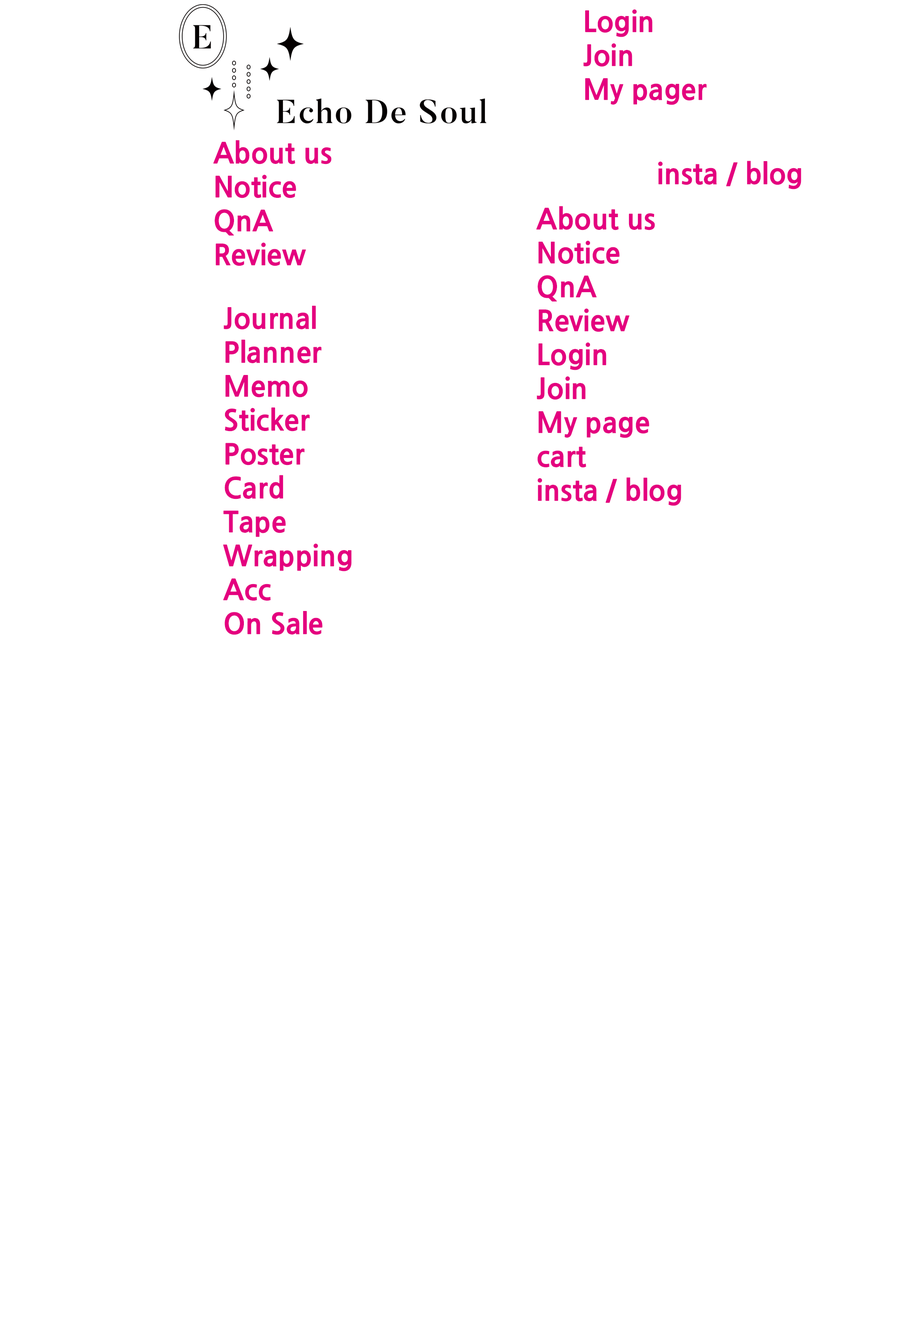
<style>
.page{position:relative;width:904px;height:1319px;background:#ffffff}
.page>*{position:absolute;margin:0}
.t1{font:28.3px "NanumGothicExtraBold";color:#e4007f}
</style>
<div class="page">
<p class="t1" style="left:584px;top:9px;width:123px;height:96px">Login<br>Join<br>My pager</p>
<p class="t1" style="left:213px;top:140px;width:119px;height:126px">About us<br>Notice<br>QnA<br>Review</p>
<p class="t1" style="left:658px;top:161px;width:144px;height:28px">insta / blog</p>
<p class="t1" style="left:536px;top:206px;width:145px;height:300px">About us<br>Notice<br>QnA<br>Review<br>Login<br>Join<br>My page<br>cart<br>insta / blog</p>
<p class="t1" style="left:223px;top:306px;width:129px;height:329px">Journal<br>Planner<br>Memo<br>Sticker<br>Poster<br>Card<br>Tape<br>Wrapping<br>Acc<br>On Sale</p>
</div>
